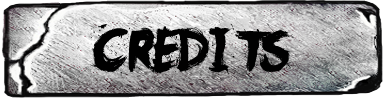
<style>
.page{position:relative;width:384px;height:98px}
.page>*{position:absolute;margin:0}
.t1{font:55px "OhNo";color:#010101}
</style>
<div class="page">
<p class="t1" style="left:89px;top:23px;width:205px;height:53px">CREDITS</p>
</div>
